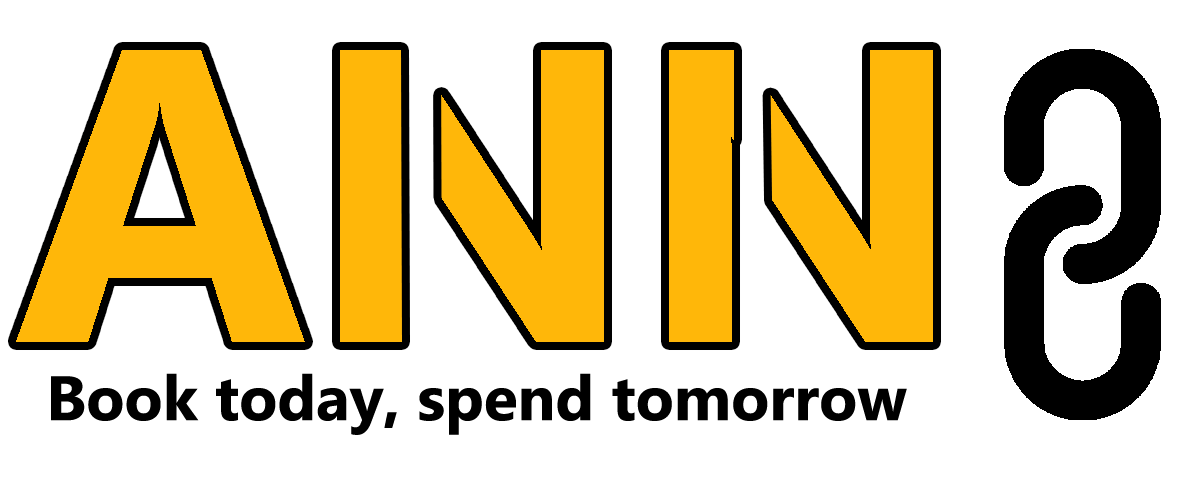
<style>
.page{position:relative;width:1200px;height:500px;background:#ffffff}
.page>*{position:absolute;margin:0}
.t1{font:62.5px "Gadugi-Bold";color:#000000}
</style>
<div class="page">
<p class="t1" style="left:51px;top:373px;width:856px;height:62px">Book today, spend tomorrow</p>
</div>
